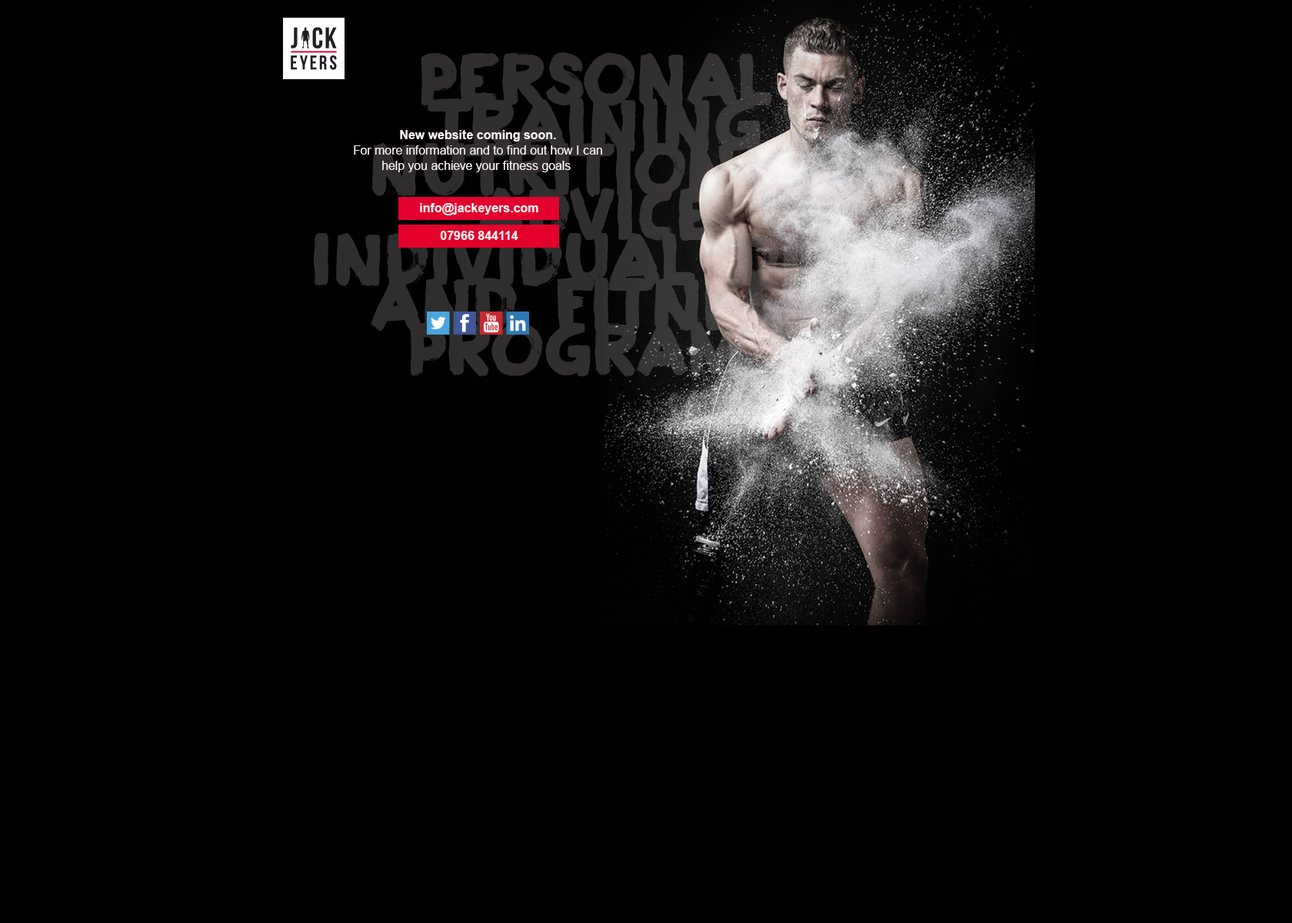
<style>
.page{position:relative;width:1292px;height:923px;background:#000000}
.page>*{position:absolute;margin:0}
.t1{font:12.3px/15.4px "ArialMT";color:#f9eeee}
.t2{font:12.3px/15.4px "Arial-BoldMT";color:#f9eeee}
.t3{font:12.3px "Arial-BoldMT";color:#f9eeee}
</style>
<div class="page">
<p class="t1" style="left:354px;top:130px;width:248px;height:42px;text-align:center"><span class="t2">New website coming soon.<br></span>For more information and to find out how I can<br>help you achieve your fitness goals</p>
<p class="t3" style="left:420px;top:203px;width:118px;height:12px">info@jackeyers.com</p>
<p class="t3" style="left:440px;top:231px;width:78px;height:9px">07966 844114</p>
</div>
